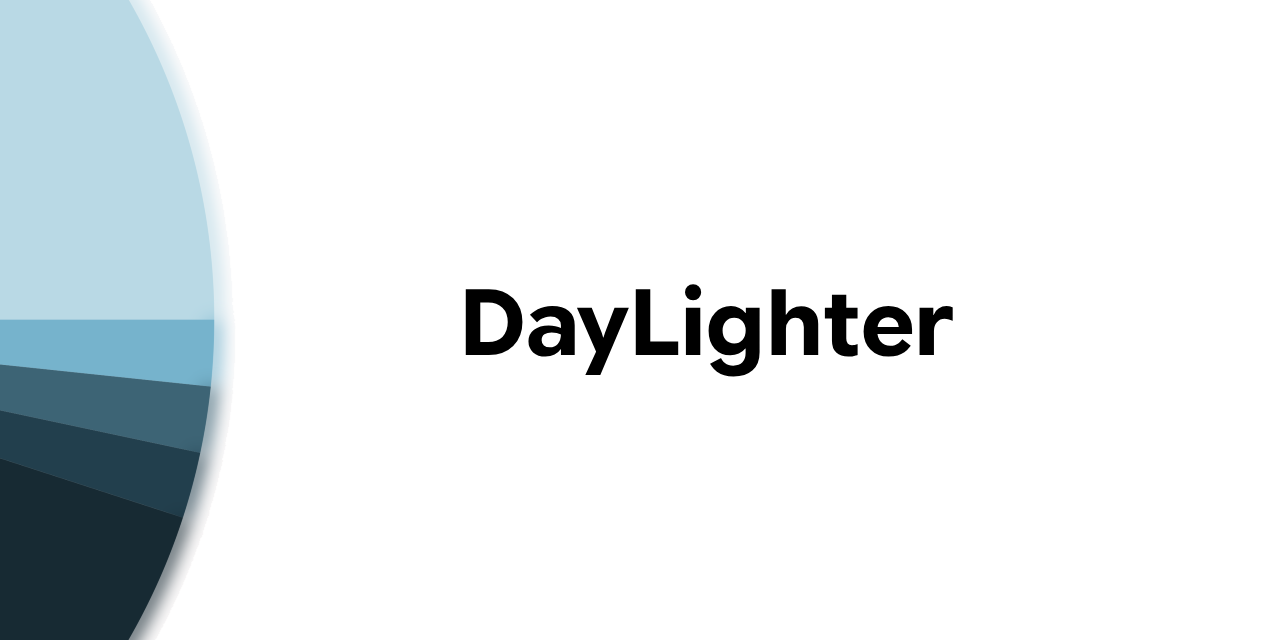
<style>
.page{position:relative;width:1280px;height:640px;background:#ffffff}
.page>*{position:absolute;margin:0}
.t1{font:92px "GoogleSansFlex-Bold";color:#000000}
</style>
<div class="page">
<p class="t1" style="left:465px;top:284px;width:488px;height:93px">DayLighter</p>
</div>
